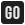
<style>
.page{position:relative;width:25px;height:25px;background:#1f1f1f}
.page>*{position:absolute;margin:0}
.t1{font:14px "Bebas";letter-spacing:0.01em;color:#e6e6e6}
</style>
<div class="page">
<p class="t1" style="left:5px;top:6px;width:15px;height:13px">go</p>
</div>
